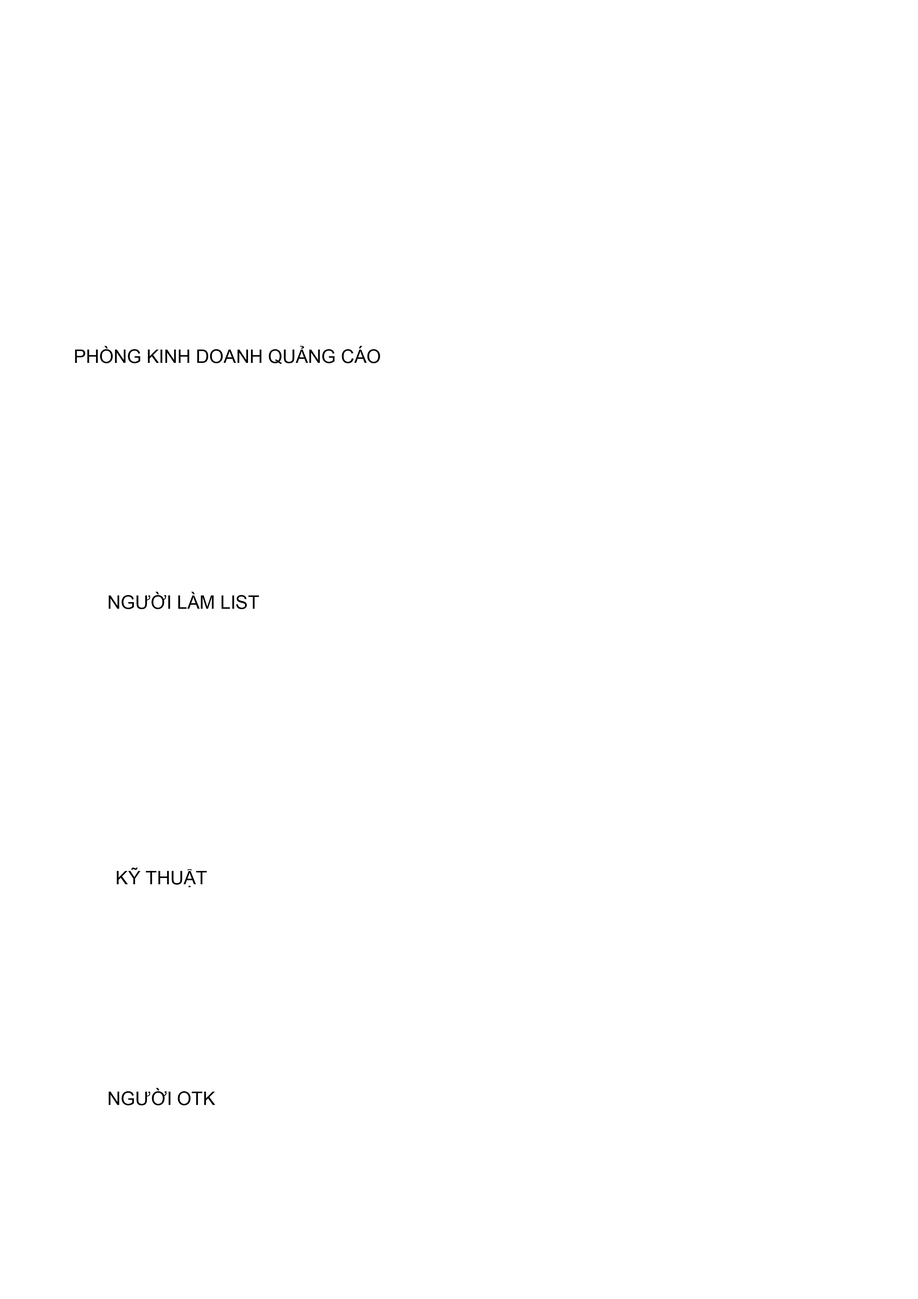
<style>
.page{position:relative;width:918px;height:1299px;background:#ffffff}
.page>*{position:absolute;margin:0}
.t1{font:18.5px "ArialMT";color:#000000}
</style>
<div class="page">
<p class="t1" style="left:75px;top:346px;width:305px;height:18px">PHÒNG KINH DOANH QUẢNG CÁO</p>
<p class="t1" style="left:108px;top:592px;width:151px;height:17px">NGƯỜI LÀM LIST</p>
<p class="t1" style="left:117px;top:867px;width:90px;height:20px">KỸ THUẬT</p>
<p class="t1" style="left:108px;top:1088px;width:107px;height:17px">NGƯỜI OTK</p>
</div>
